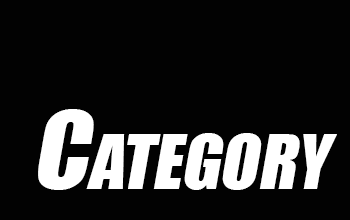
<style>
.page{position:relative;width:350px;height:220px;background:#020202}
.page>*{position:absolute;margin:0}
.t1{font:100px "Impact";color:#ffffff;font-variant:small-caps;font-style:italic}
</style>
<div class="page">
<p class="t1" style="left:38px;top:109px;width:299px;height:81px">Category</p>
</div>
